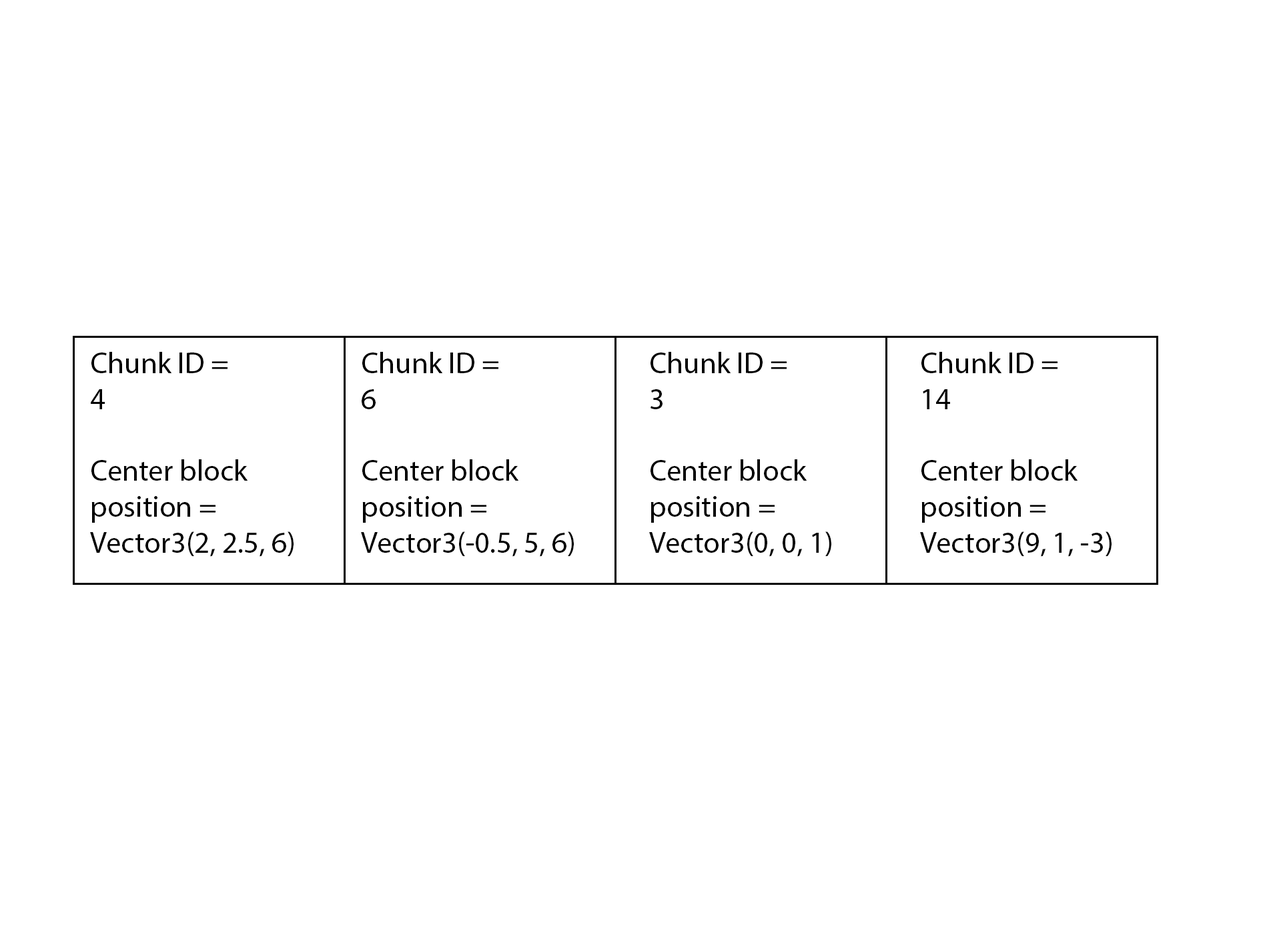
<style>
.page{position:relative;width:1261px;height:946px;background:#ffffff}
.page>*{position:absolute;margin:0}
.t1{font:29.9px "MyriadPro-Regular";color:#000000}
</style>
<div class="page">
<p class="t1" style="left:90px;top:352px;width:204px;height:205px">Chunk ID = <br>4<br><br>Center block <br>position =  <br>Vector3(2, 2.5, 6)</p>
<p class="t1" style="left:361px;top:352px;width:213px;height:205px">Chunk ID = <br>6<br><br>Center block <br>position =  <br>Vector3(-0.5, 5, 6)</p>
<p class="t1" style="left:649px;top:352px;width:182px;height:205px">Chunk ID = <br>3<br><br>Center block <br>position =  <br>Vector3(0, 0, 1)</p>
<p class="t1" style="left:920px;top:352px;width:192px;height:205px">Chunk ID = <br>14<br><br>Center block <br>position =  <br>Vector3(9, 1, -3)</p>
</div>
